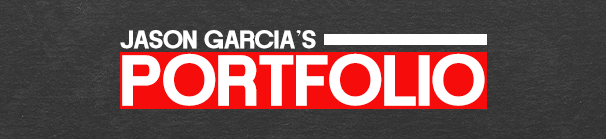
<style>
.page{position:relative;width:606px;height:139px}
.page>*{position:absolute;margin:0}
.t1{font:25.9px "DOGMADEMO-Regular";color:#ffffff}
.t2{font:72px "DOGMADEMO-Regular";color:#ffffff}
</style>
<div class="page">
<p class="t1" style="left:120px;top:30px;width:196px;height:19px">jason Garcia’s</p>
<p class="t2" style="left:122px;top:53px;width:363px;height:53px">PORTFOLIO</p>
</div>
